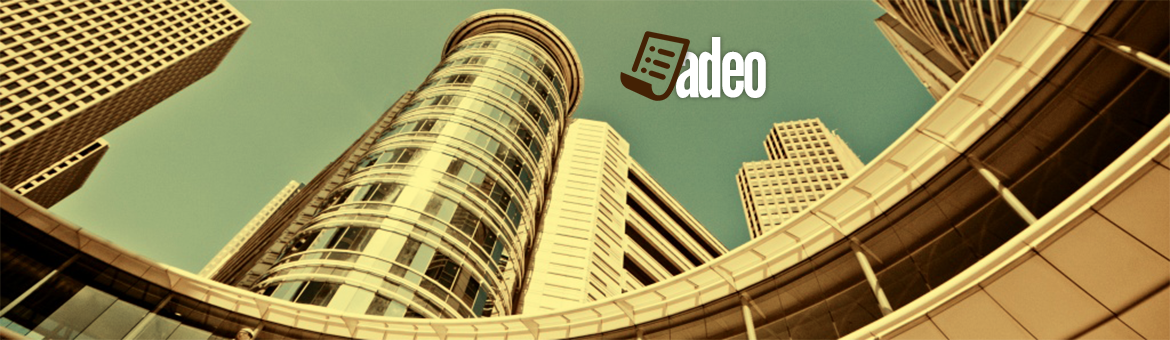
<style>
.page{position:relative;width:1170px;height:340px}
.page>*{position:absolute;margin:0}
.t1{font:82.1px "LeagueGothic-Regular";letter-spacing:-0.05em;color:#ffffff}
</style>
<div class="page">
<p class="t1" style="left:676px;top:37px;width:90px;height:61px">adeo</p>
</div>
